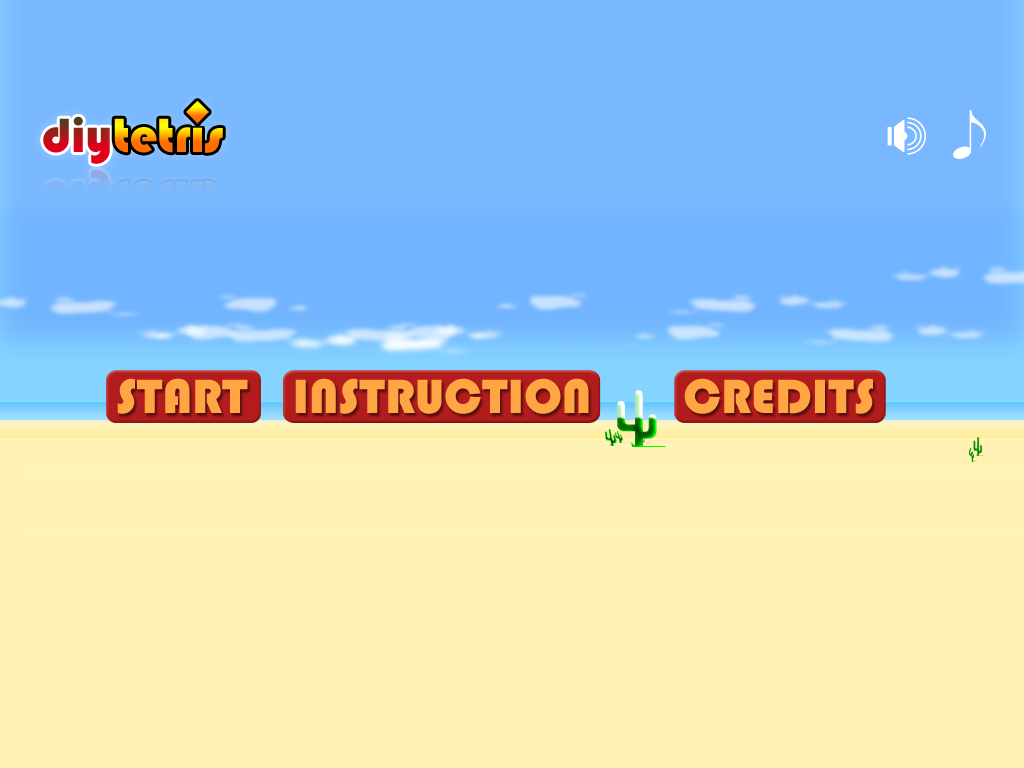
<style>
.page{position:relative;width:1024px;height:768px;background:#fff2b4}
.page>*{position:absolute;margin:0}
.t1{font:50px "Bauhaus93"}
.t2{font:50px "Bauhaus93";color:#ffa544}
</style>
<div class="page">
<p class="t1" style="left:43px;top:116px;width:67px;height:48px">diy</p>
<p class="t2" style="left:117px;top:378px;width:131px;height:36px">START</p>
<p class="t2" style="left:295px;top:378px;width:294px;height:36px">INSTRUCTION</p>
<p class="t2" style="left:684px;top:378px;width:189px;height:36px">CREDITS</p>
</div>
